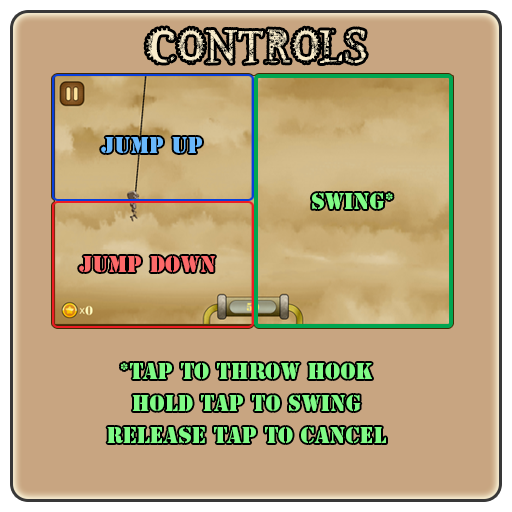
<style>
.page{position:relative;width:512px;height:512px;background:#c8a581}
.page>*{position:absolute;margin:0}
.t1{font:50px "SteampunkbyMartavanEck";letter-spacing:0.01em;color:#f9eccb}
.t2{font:21px "StencilStd";letter-spacing:0.01em;color:#69b8fc}
.t3{font:21px "StencilStd";letter-spacing:0.01em;color:#80fb86}
.t4{font:21px "StencilStd";letter-spacing:0.01em;color:#fc6969}
.t5{font:21px/32px "StencilStd";letter-spacing:0.01em;color:#80fb86}
</style>
<div class="page">
<p class="t1" style="left:146px;top:28px;width:220px;height:36px">CONTROLS</p>
<p class="t2" style="left:101px;top:137px;width:101px;height:16px">Jump Up</p>
<p class="t3" style="left:312px;top:193px;width:81px;height:16px">Swing*</p>
<p class="t4" style="left:79px;top:256px;width:136px;height:16px">Jump Down</p>
<p class="t5" style="left:107px;top:363px;width:279px;height:80px;text-align:center">*tap to throw hook<br>HOld Tap to swing<br>Release tap to Cancel</p>
</div>
